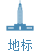
<style>
.page{position:relative;width:40px;height:55px;background:#ffffff}
.page>*{position:absolute;margin:0}
.t1{font:22.5px "SimSun";letter-spacing:0.05em;color:#4788b2;font-variant:small-caps}
</style>
<div class="page">
<p class="t1" style="left:8px;top:39px;width:24px;height:12px">地标</p>
</div>
